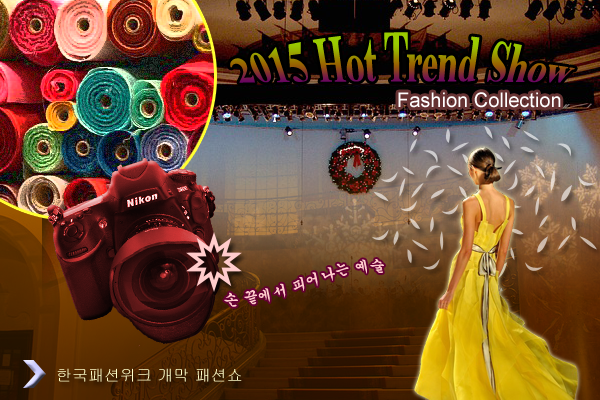
<style>
.page{position:relative;width:600px;height:400px}
.page>*{position:absolute;margin:0}
.t1{font:35px "TimesNewRomanPS-BoldMT"}
.t2{font:20px "ArialMT";color:#ffffff}
.t3{font:15px "Gungsuh";color:#ffcccc}
.t4{font:16px "Gulim";color:#ffffcc}
</style>
<div class="page">
<p class="t1" style="left:230px;top:32px;width:345px;height:51px">2015 Hot Trend Show</p>
<p class="t2" style="left:398px;top:92px;width:163px;height:16px">Fashion Collection</p>
<p class="t3" style="left:224px;top:259px;width:160px;height:48px;rotate:-12deg">손 끝에서 피어나는 예술</p>
<p class="t4" style="left:57px;top:368px;width:185px;height:14px">한국패션위크 개막 패션쇼</p>
</div>
